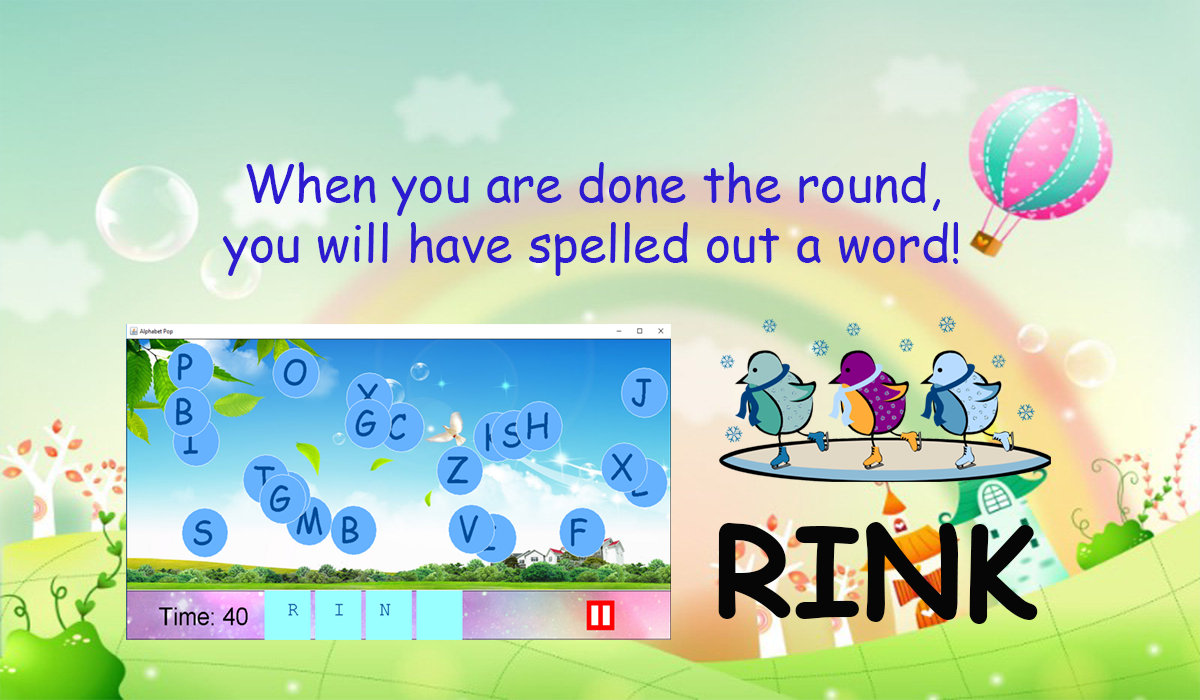
<style>
.page{position:relative;width:1200px;height:700px}
.page>*{position:absolute;margin:0}
.t1{font:12px "ComicSansMS";color:#2d1ccf}
.t2{font:125px "ComicSansMS-Bold";color:#060606}
</style>
<div class="page">
<p class="t1" style="left:222px;top:162px;width:737px;height:114px;text-align:center">When you are done the round,<br>you will have spelled out a word!</p>
<p class="t2" style="left:718px;top:522px;width:320px;height:102px">RINK</p>
</div>
